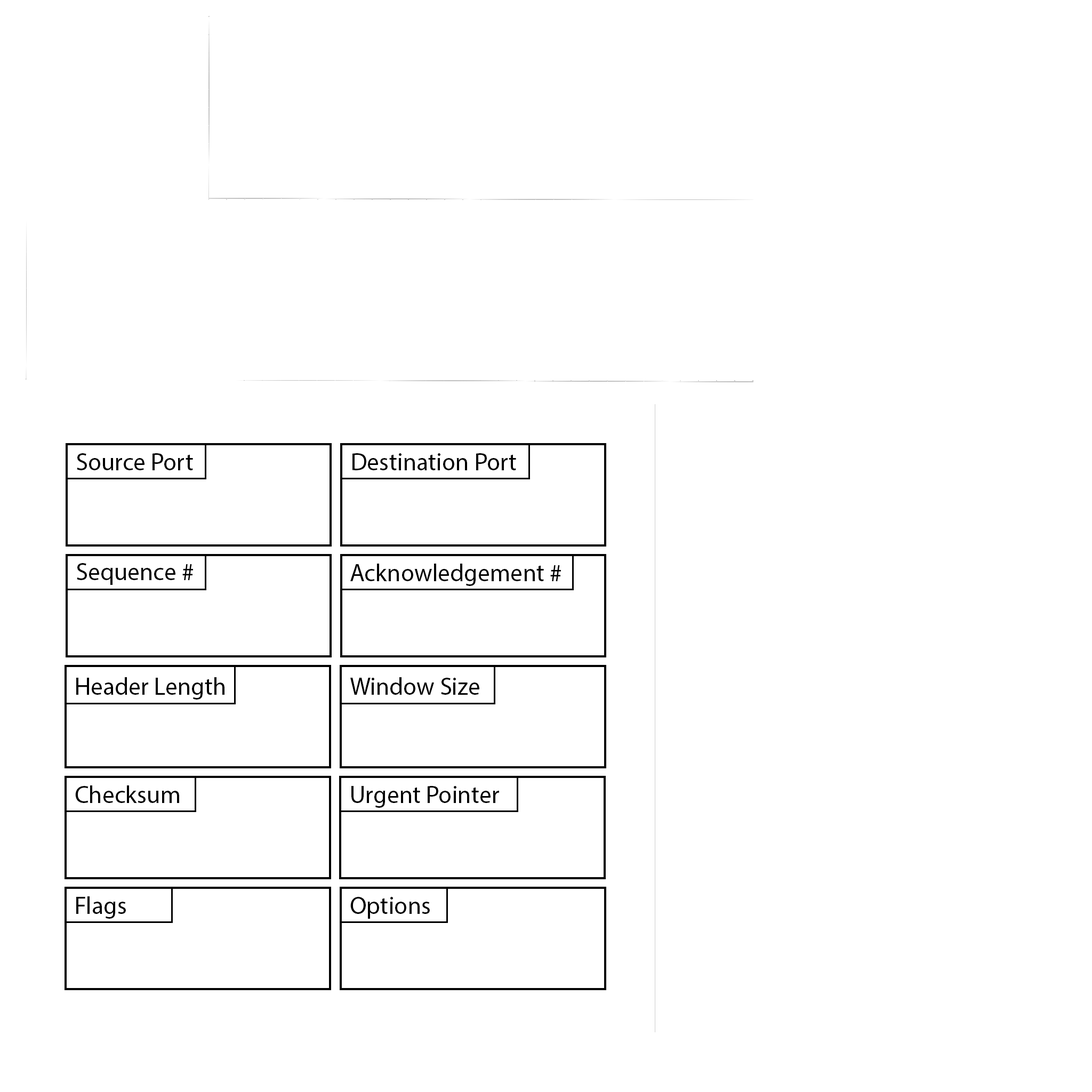
<style>
.page{position:relative;width:1092px;height:1092px;background:#ffffff}
.page>*{position:absolute;margin:0}
.t1{font:24.5px "MyriadPro-Regular";color:#000000}
</style>
<div class="page">
<p class="t1" style="left:77px;top:453px;width:116px;height:17px">Source Port</p>
<p class="t1" style="left:352px;top:453px;width:164px;height:17px">Destination Port</p>
<p class="t1" style="left:77px;top:563px;width:116px;height:22px">Sequence #</p>
<p class="t1" style="left:350px;top:564px;width:211px;height:22px">Acknowledgement #</p>
<p class="t1" style="left:76px;top:677px;width:148px;height:23px">Header Length</p>
<p class="t1" style="left:350px;top:677px;width:129px;height:18px">Window Size</p>
<p class="t1" style="left:75px;top:785px;width:104px;height:18px">Checksum</p>
<p class="t1" style="left:351px;top:786px;width:148px;height:22px">Urgent Pointer</p>
<p class="t1" style="left:76px;top:896px;width:50px;height:23px">Flags</p>
<p class="t1" style="left:350px;top:897px;width:80px;height:22px">Options</p>
</div>
